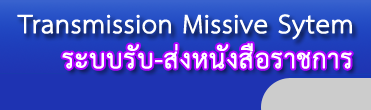
<style>
.page{position:relative;width:371px;height:110px;background:#1e33b2}
.page>*{position:absolute;margin:0}
.t1{font:37.5px "THSarabunPSK";color:#ffffff;font-weight:bold}
</style>
<div class="page">
<p class="t1" style="left:17px;top:14px;width:335px;height:26px">Transmission Missive Sytem</p>
<p class="t1" style="left:62px;top:43px;width:290px;height:26px">ระบบรับ-ส่งหนังสือราชการ</p>
</div>
